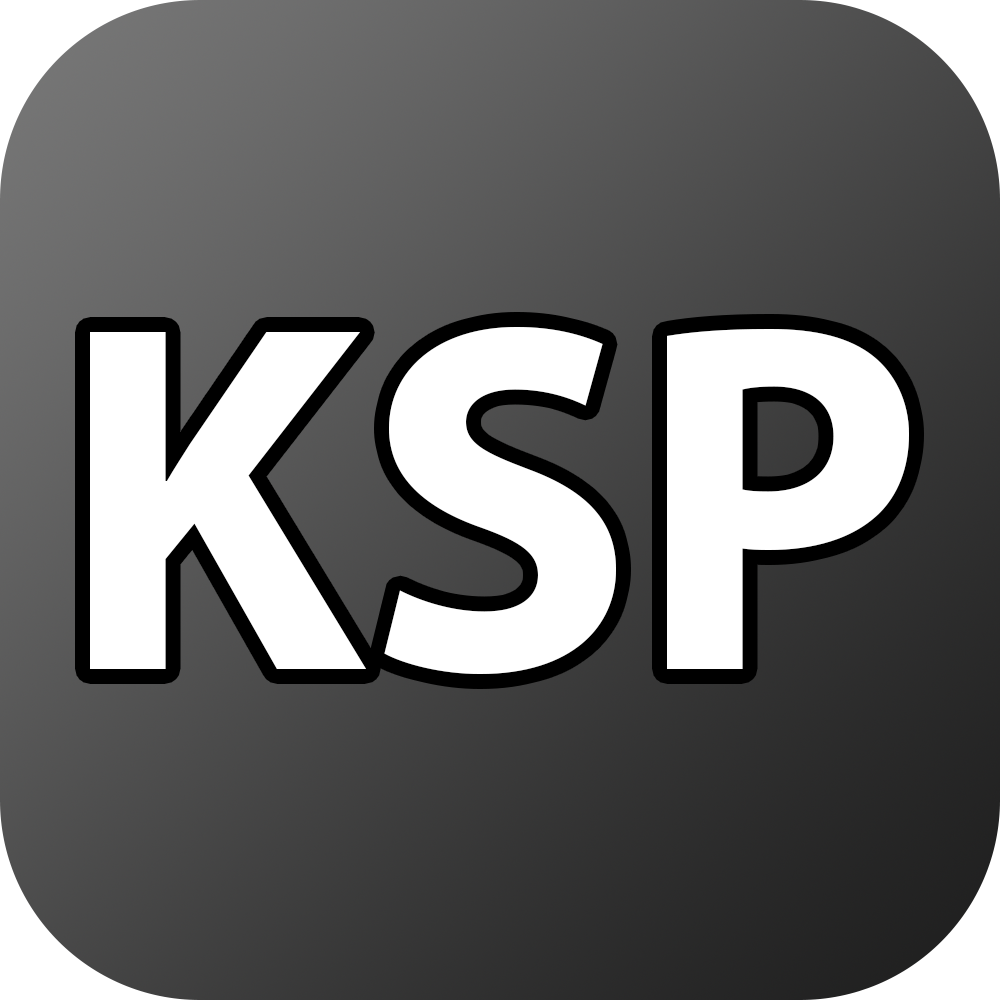
<style>
.page{position:relative;width:1000px;height:1000px}
.page>*{position:absolute;margin:0}
.t1{font:500px "MyriadPro-Bold";color:#ffffff}
</style>
<div class="page">
<p class="t1" style="left:90px;top:327px;width:819px;height:347px">KSP</p>
</div>
